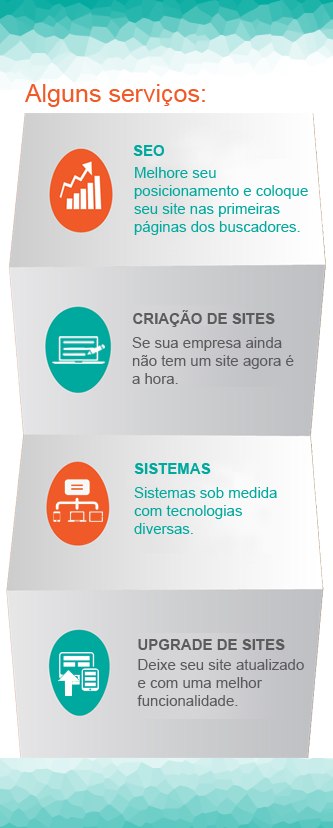
<style>
.page{position:relative;width:333px;height:828px}
.page>*{position:absolute;margin:0}
.t1{font:25px "ArialMT";color:#f05a28}
.t2{font:15px "Arial-BoldMT";color:#00a99e}
.t3{font:15px "ArialMT";color:#00a99e}
.t4{font:15px "Arial-BoldMT";color:#5b5b5c}
.t5{font:15px "ArialMT";color:#5b5b5c}
</style>
<div class="page">
<p class="t1" style="left:25px;top:84px;width:180px;height:23px">Alguns serviços:</p>
<p class="t2" style="left:133px;top:145px;width:32px;height:11px">SEO</p>
<p class="t3" style="left:134px;top:167px;width:174px;height:68px">Melhore seu posicionamento e coloque seu site nas primeiras páginas dos buscadores.</p>
<p class="t4" style="left:133px;top:310px;width:142px;height:17px">CRIAÇÃO DE SITES</p>
<p class="t5" style="left:132px;top:337px;width:162px;height:47px">Se sua empresa ainda não tem um site agora é  a hora.</p>
<p class="t2" style="left:134px;top:463px;width:77px;height:11px">SISTEMAS</p>
<p class="t3" style="left:134px;top:487px;width:143px;height:47px">Sistemas sob medida com tecnologias diversas.</p>
<p class="t4" style="left:138px;top:639px;width:147px;height:11px">UPGRADE DE SITES</p>
<p class="t5" style="left:137px;top:659px;width:167px;height:47px">Deixe seu site atualizado e com uma melhor  funcionalidade.</p>
</div>
